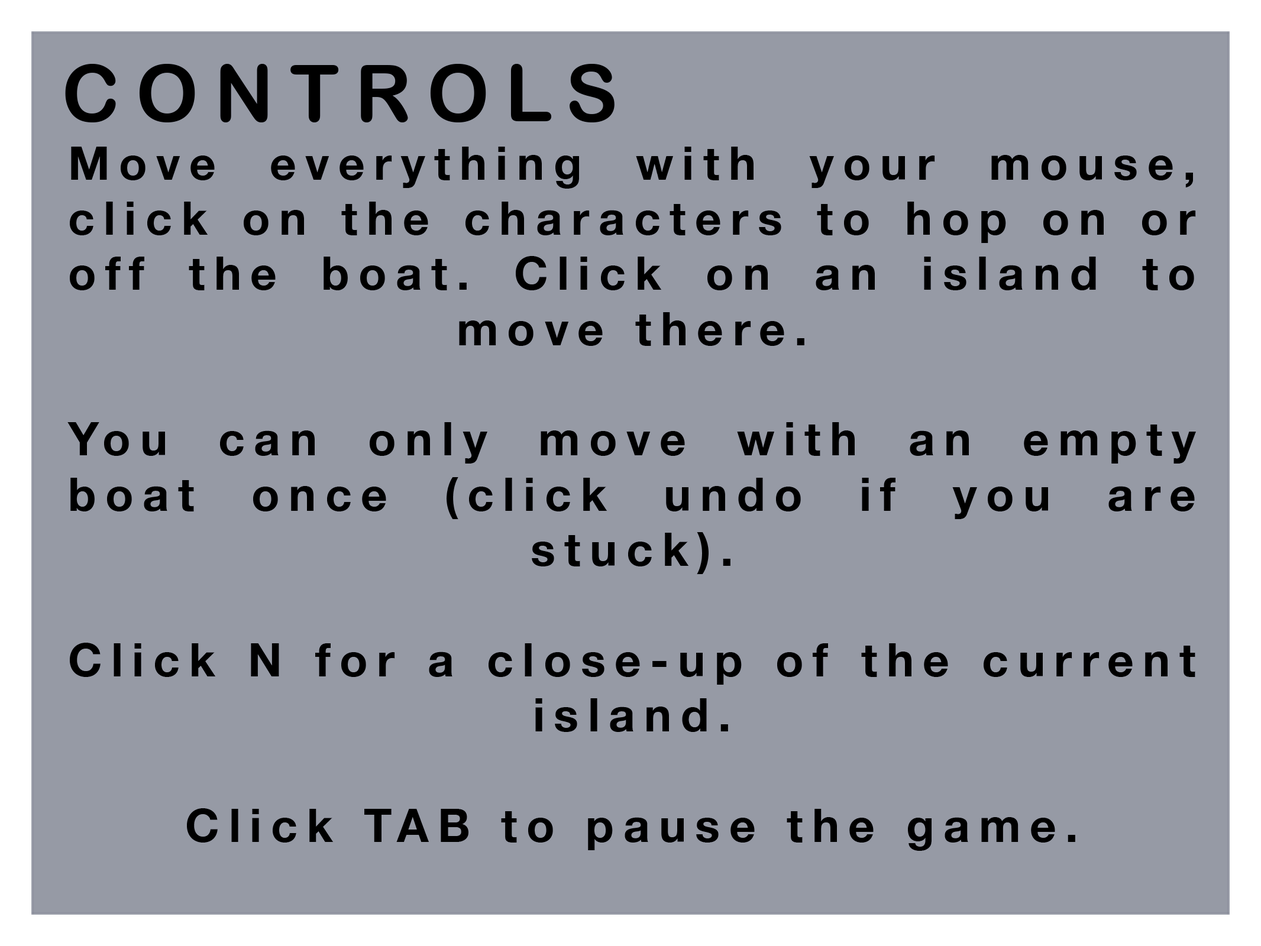
<style>
.page{position:relative;width:1261px;height:946px;background:#969aa5}
.page>*{position:absolute;margin:0}
.t1{font:78.8px "ArialRoundedMTBold";letter-spacing:0.2em;color:#000000}
.t2{font:46px "HelveticaNeue-Bold";letter-spacing:0.2em;color:#000000}
</style>
<div class="page">
<p class="t1" style="left:65px;top:64px;width:549px;height:58px">CONTROLS</p>
<p class="t2" style="left:67px;top:147px;width:1128px;height:704px;text-align:justify">Move everything with your mouse, click on the characters to hop on or off the boat. Click on an island to move there. <br><br>You can only move with an empty boat once (click undo if you are stuck).<br><br>Click N for a close-up of the current island.<br><br>Click TAB to pause the game.</p>
</div>
